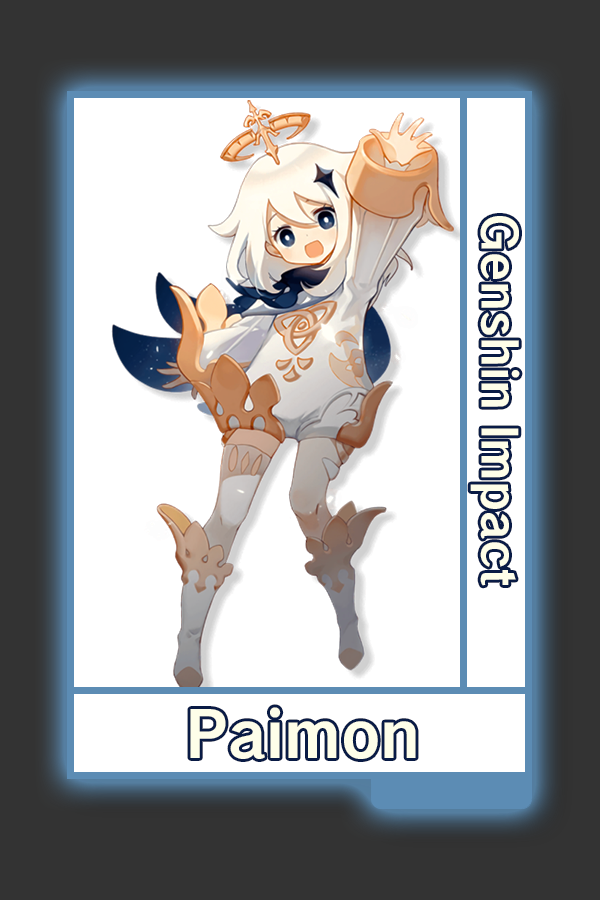
<style>
.page{position:relative;width:600px;height:900px;background:#ffffff}
.page>*{position:absolute;margin:0}
.t1{font:48.8px "HYWenHei-HEW";color:#fefef4}
.t2{font:65.2px "HYWenHei-HEW";color:#fefef4}
</style>
<div class="page">
<p class="t1" style="left:470px;top:216px;width:50px;height:370px;rotate:90deg">Genshin Impact</p>
<p class="t2" style="left:190px;top:707px;width:226px;height:52px">Paimon</p>
</div>
